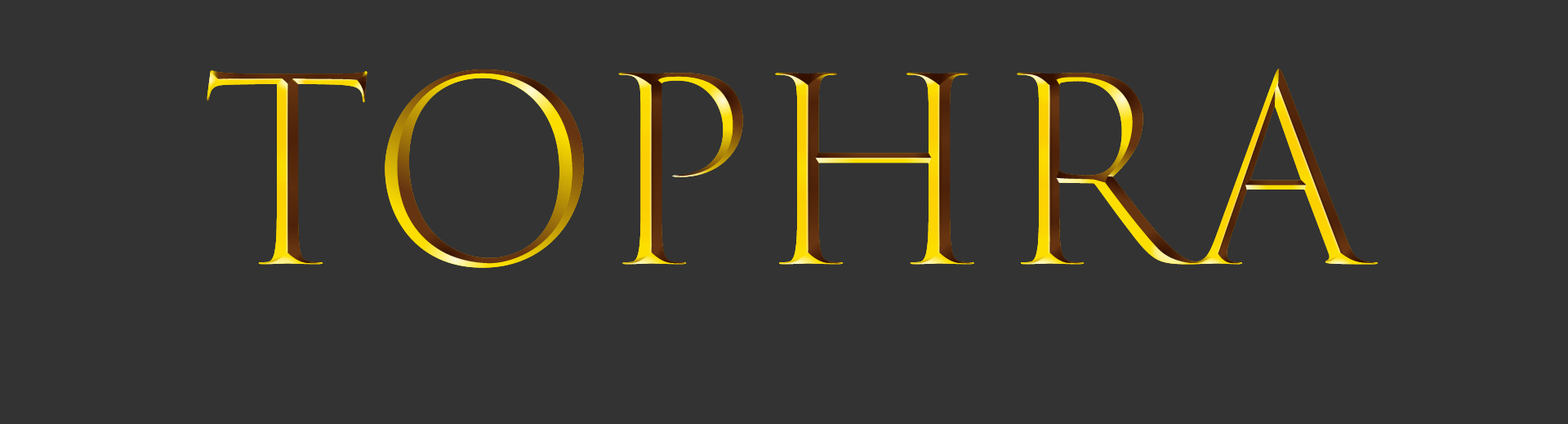
<style>
.page{position:relative;width:1568px;height:424px;background:#333333}
.page>*{position:absolute;margin:0}
.t1{font:252.7px "TrajanColor-Concept";text-transform:uppercase}
</style>
<div class="page">
<p class="t1" style="left:207px;top:69px;width:1171px;height:199px">TOPHRA</p>
</div>
